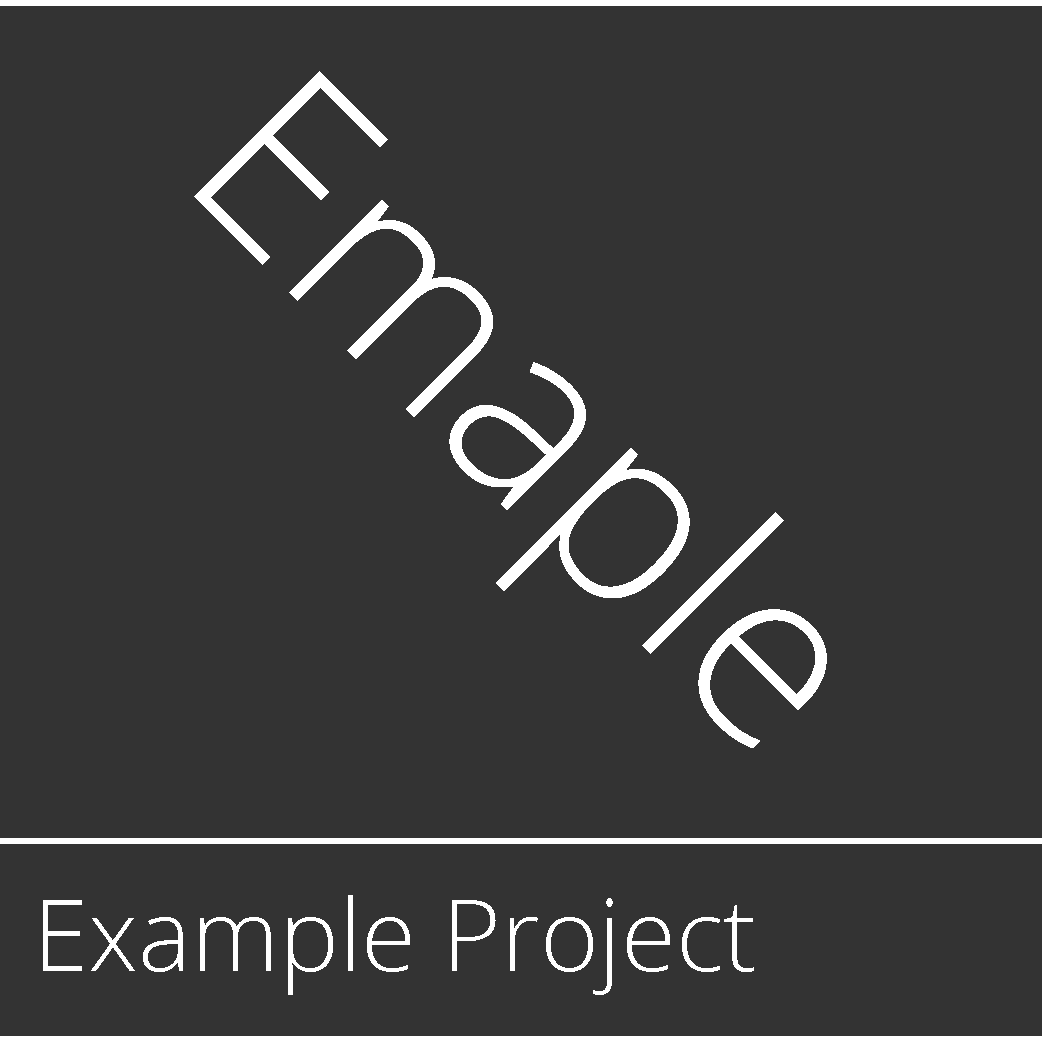
<style>
.page{position:relative;width:1042px;height:1042px;background:#333333}
.page>*{position:absolute;margin:0}
.t1{font:249px "OpenSans-Light";color:#ffffff}
.t2{font:100px "OpenSans-Light";color:#ffffff}
</style>
<div class="page">
<p class="t1" style="left:194px;top:71px;width:633px;height:677px;rotate:45deg">Emaple</p>
<p class="t2" style="left:43px;top:895px;width:711px;height:100px">Example Project</p>
</div>
